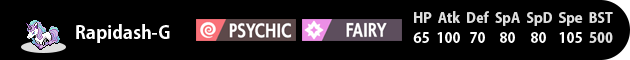
<style>
.page{position:relative;width:630px;height:60px;background:#000000}
.page>*{position:absolute;margin:0}
.t1{font:14px "AdobeGothicStd-Bold";color:#dedede}
.t2{font:18px "AdobeGothicStd-Bold";color:#ffffff}
.t3{font:14px "AdobeGothicStd-Bold";color:#ffffff}
</style>
<div class="page">
<p class="t1" style="left:414px;top:11px;width:199px;height:15px">HP  Atk  Def  SpA  SpD  Spe  BST</p>
<p class="t2" style="left:76px;top:24px;width:94px;height:19px">Rapidash-G</p>
<p class="t3" style="left:413px;top:32px;width:16px;height:11px">65</p>
<p class="t3" style="left:437px;top:32px;width:23px;height:11px">100</p>
<p class="t3" style="left:470px;top:32px;width:15px;height:11px">70</p>
<p class="t3" style="left:500px;top:32px;width:15px;height:11px">80</p>
<p class="t3" style="left:531px;top:32px;width:15px;height:11px">80</p>
<p class="t3" style="left:559px;top:32px;width:23px;height:11px">105</p>
<p class="t1" style="left:589px;top:32px;width:24px;height:11px">500</p>
</div>
